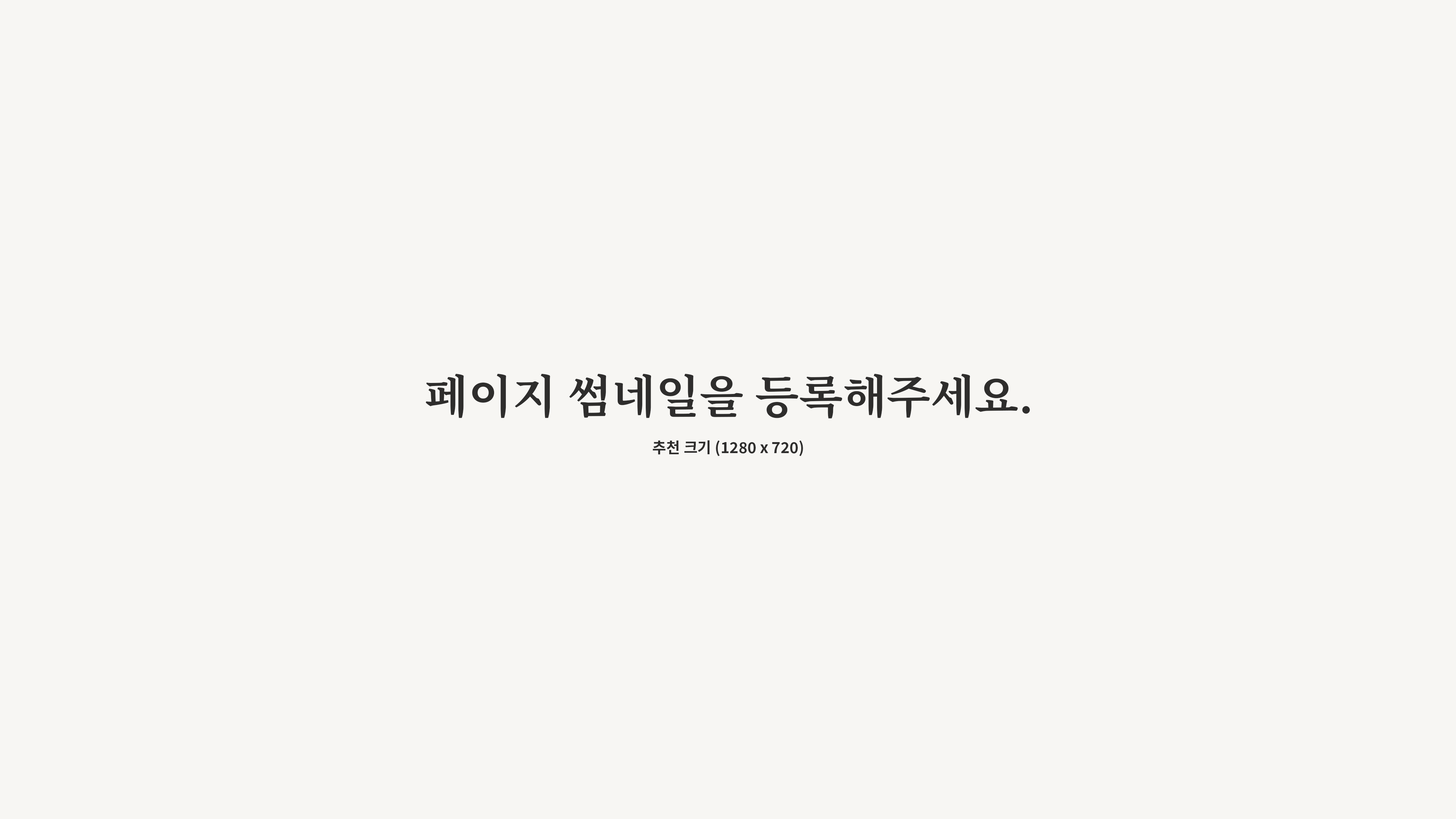
<style>
.page{position:relative;width:1456px;height:819px;background:#f7f6f3}
.page>*{position:absolute;margin:0}
.t1{font:45.5px "NotoSerifKR-Bold";color:#2e2d2c}
.t2{font:15.2px "NotoSansKR-Bold";color:#2e2d2c}
</style>
<div class="page">
<p class="t1" style="left:426px;top:374px;width:604px;height:45px">페이지 썸네일을 등록해주세요.</p>
<p class="t2" style="left:653px;top:440px;width:150px;height:16px">추천 크기 (1280 x 720)</p>
</div>
